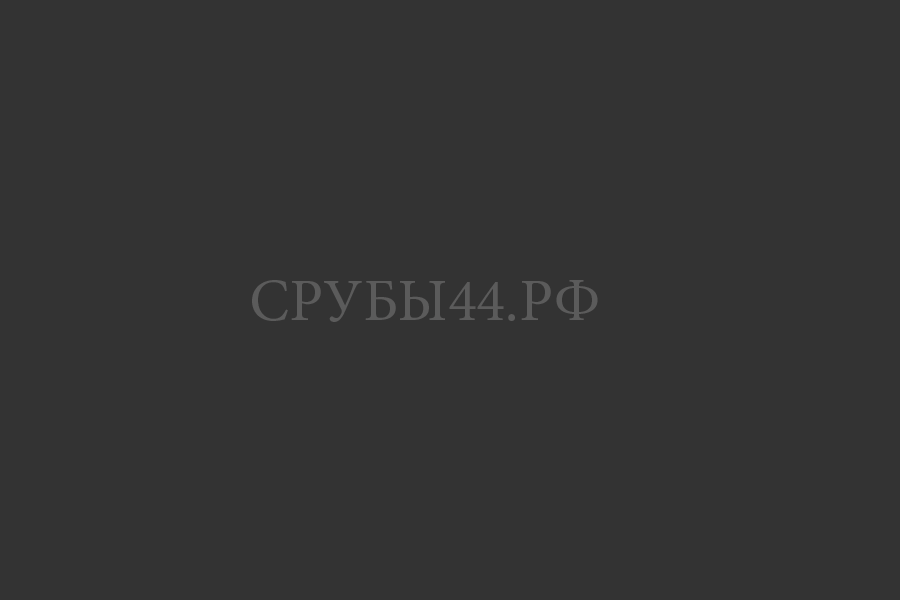
<style>
.page{position:relative;width:900px;height:600px;background:#333333}
.page>*{position:absolute;margin:0}
.t1{font:60px "MinionPro-Regular";color:#5b5b5b}
</style>
<div class="page">
<p class="t1" style="left:252px;top:280px;width:346px;height:42px">СРУБЫ44.РФ</p>
</div>
